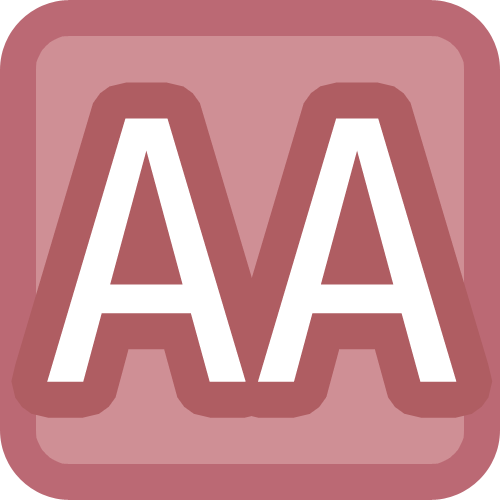
<style>
.page{position:relative;width:500px;height:500px;background:#af5d62}
.page>*{position:absolute;margin:0}
.t1{font:360.5px "Menlo-Regular";color:#ffffff}
</style>
<div class="page">
<p class="t1" style="left:47px;top:118px;width:410px;height:264px">AA</p>
</div>
